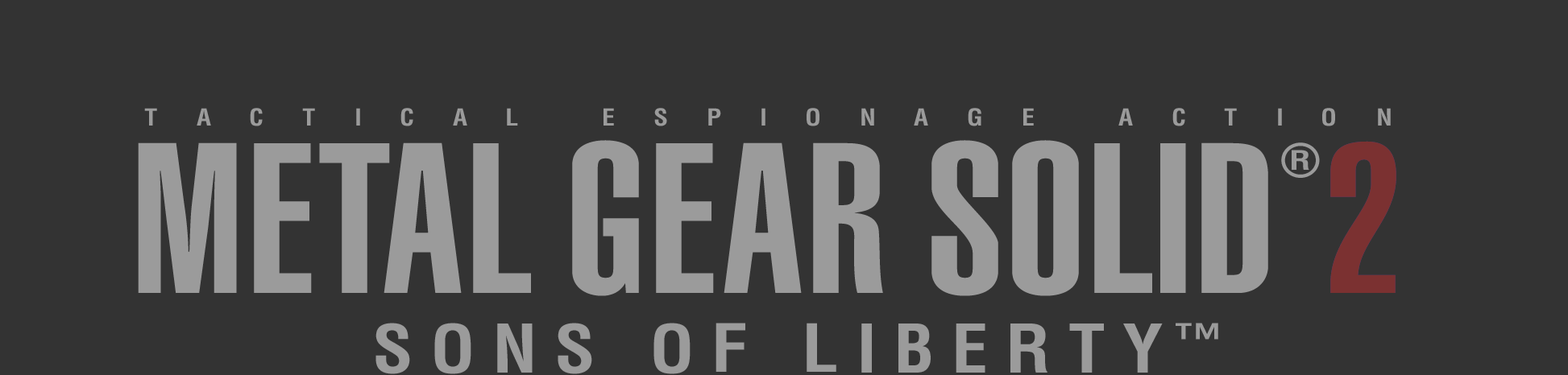
<style>
.page{position:relative;width:1568px;height:375px;background:#333333}
.page>*{position:absolute;margin:0}
.t1{font:22.9px "Helvetica-Condensed-Bold";letter-spacing:0.048em;color:#9b9b9b;scale:1.15 1}
.t2{font:210.4px "Helvetica-UltraCompressed";letter-spacing:0.048em;color:#9b9b9b;scale:1.14 1}
.t3{font:44.9px "Helvetica-Condensed-Bold";letter-spacing:0.048em;color:#9b9b9b;scale:1.08 1}
.t4{font:26.4px "Helvetica-Condensed-Bold";letter-spacing:0.048em;color:#9b9b9b;scale:1.33 1}
.t5{font:210.4px "Helvetica-UltraCompressed";letter-spacing:0.048em;color:#7b3131;scale:1.12 1}
.t6{font:64.4px "Helvetica-Condensed-Bold";letter-spacing:0.048em;color:#9b9b9b;scale:1.14 1}
.t7{font:65.4px "Helvetica-Condensed-Bold";letter-spacing:0.048em;color:#9b9b9b;scale:1.12 1}
.t8{font:65.1px "Helvetica-Condensed-Bold";letter-spacing:0.048em;color:#9b9b9b;scale:1.13 1}
.t9{font:64.8px "Helvetica-Condensed-Bold";letter-spacing:0.048em;color:#9b9b9b;scale:1.13 1}
.t10{font:65.5px "Helvetica-Condensed-Bold";letter-spacing:0.048em;color:#9b9b9b;scale:1.12 1}
.t11{font:39.1px "Helvetica-UltraCompressed";letter-spacing:0.048em;color:#9b9b9b;scale:1.22 1}
</style>
<div class="page">
<p class="t1" style="left:144px;top:108px;width:13px;height:18px">T</p>
<p class="t1" style="left:197px;top:108px;width:14px;height:18px">A</p>
<p class="t1" style="left:250px;top:108px;width:13px;height:19px">C</p>
<p class="t1" style="left:302px;top:108px;width:13px;height:18px">T</p>
<p class="t1" style="left:356px;top:108px;width:4px;height:18px">I</p>
<p class="t1" style="left:400px;top:108px;width:13px;height:19px">C</p>
<p class="t1" style="left:453px;top:108px;width:14px;height:18px">A</p>
<p class="t1" style="left:507px;top:108px;width:11px;height:18px">L</p>
<p class="t1" style="left:604px;top:108px;width:10px;height:18px">E</p>
<p class="t1" style="left:654px;top:108px;width:13px;height:19px">S</p>
<p class="t1" style="left:708px;top:108px;width:13px;height:18px">P</p>
<p class="t1" style="left:761px;top:108px;width:4px;height:18px">I</p>
<p class="t1" style="left:807px;top:108px;width:12px;height:19px">O</p>
<p class="t1" style="left:861px;top:108px;width:13px;height:18px">N</p>
<p class="t1" style="left:914px;top:108px;width:14px;height:18px">A</p>
<p class="t1" style="left:968px;top:108px;width:13px;height:19px">G</p>
<p class="t1" style="left:1023px;top:108px;width:11px;height:18px">E</p>
<p class="t1" style="left:1118px;top:108px;width:15px;height:18px">A</p>
<p class="t1" style="left:1172px;top:108px;width:13px;height:19px">C</p>
<p class="t1" style="left:1224px;top:108px;width:13px;height:18px">T</p>
<p class="t1" style="left:1278px;top:108px;width:4px;height:18px">I</p>
<p class="t1" style="left:1322px;top:108px;width:13px;height:19px">O</p>
<p class="t1" style="left:1378px;top:108px;width:13px;height:18px">N</p>
<p class="t2" style="left:138px;top:143px;width:99px;height:150px">M</p>
<p class="t2" style="left:254px;top:143px;width:58px;height:150px">E</p>
<p class="t2" style="left:319px;top:143px;width:71px;height:150px">T</p>
<p class="t2" style="left:384px;top:143px;width:78px;height:150px">A</p>
<p class="t2" style="left:473px;top:143px;width:58px;height:150px">L</p>
<p class="t2" style="left:572px;top:140px;width:67px;height:157px">G</p>
<p class="t2" style="left:656px;top:143px;width:58px;height:150px">E</p>
<p class="t2" style="left:724px;top:143px;width:78px;height:150px">A</p>
<p class="t2" style="left:813px;top:143px;width:70px;height:150px">R</p>
<p class="t2" style="left:931px;top:140px;width:67px;height:157px">S</p>
<p class="t2" style="left:1012px;top:140px;width:67px;height:157px">O</p>
<p class="t2" style="left:1094px;top:143px;width:58px;height:150px">L</p>
<p class="t2" style="left:1160px;top:143px;width:26px;height:150px">I</p>
<p class="t2" style="left:1201px;top:143px;width:67px;height:150px">D</p>
<p class="t3" style="left:1281px;top:143px;width:39px;height:35px">®</p>
<p class="t4" style="left:1292px;top:150px;width:17px;height:20px">R</p>
<p class="t5" style="left:1330px;top:141px;width:66px;height:152px">2</p>
<p class="t5" style="left:1330px;top:141px;width:66px;height:152px">2</p>
<p class="t6" style="left:375px;top:323px;width:35px;height:52px">S</p>
<p class="t6" style="left:434px;top:323px;width:37px;height:52px">O</p>
<p class="t7" style="left:497px;top:324px;width:36px;height:49px">N</p>
<p class="t6" style="left:558px;top:323px;width:34px;height:52px">S</p>
<p class="t6" style="left:653px;top:323px;width:38px;height:52px">O</p>
<p class="t8" style="left:716px;top:323px;width:29px;height:49px">F</p>
<p class="t9" style="left:807px;top:323px;width:29px;height:49px">L</p>
<p class="t10" style="left:861px;top:324px;width:11px;height:49px">I</p>
<p class="t10" style="left:898px;top:324px;width:33px;height:49px">B</p>
<p class="t10" style="left:956px;top:324px;width:29px;height:49px">E</p>
<p class="t10" style="left:1010px;top:324px;width:37px;height:49px">R</p>
<p class="t10" style="left:1069px;top:324px;width:35px;height:49px">T</p>
<p class="t10" style="left:1123px;top:324px;width:40px;height:49px">Y</p>
<p class="t11" style="left:1176px;top:323px;width:42px;height:17px">™</p>
</div>
